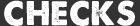
<style>
.page{position:relative;width:140px;height:26px;background:#ffffff}
.page>*{position:absolute;margin:0}
.t1{font:36px "ALoveofThunder";color:#ffffff}
</style>
<div class="page">
<p class="t1" style="left:4px;top:0px;width:131px;height:26px">checks</p>
</div>
